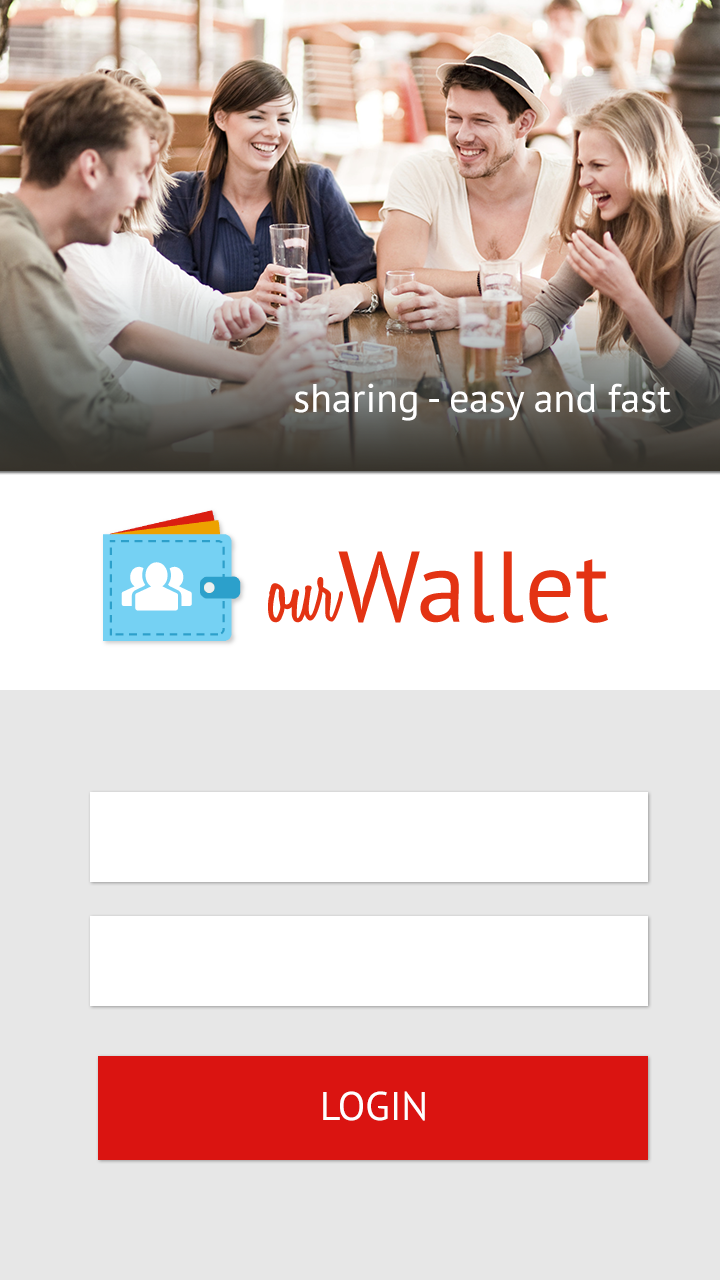
<style>
.page{position:relative;width:720px;height:1280px;background:#e7e7e7}
.page>*{position:absolute;margin:0}
.t1{font:40px "PTSans-Regular";color:#ffffff}
</style>
<div class="page">
<p class="t1" style="left:294px;top:383px;width:377px;height:38px">sharing - easy and fast</p>
<p class="t1" style="left:323px;top:1091px;width:102px;height:30px">LOGIN</p>
</div>
